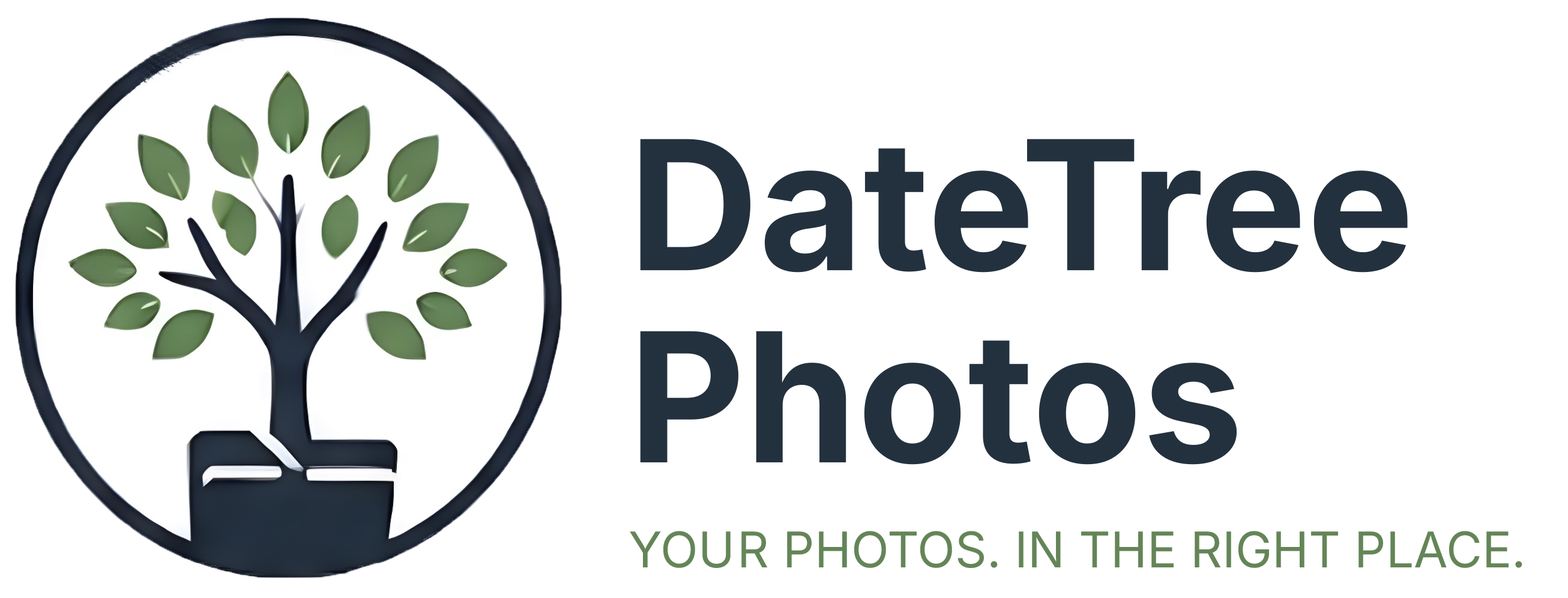
<style>
.page{position:relative;width:1568px;height:598px;background:#ffffff}
.page>*{position:absolute;margin:0}
.t1{font:180.1px/192.1px "Inter-Bold";color:#23313e}
.t2{font:49.2px "Inter-Regular";color:#648558}
</style>
<div class="page">
<p class="t1" style="left:640px;top:139px;width:768px;height:326px">DateTree<br>Photos</p>
<p class="t2" style="left:630px;top:531px;width:892px;height:37px">YOUR PHOTOS. IN THE RIGHT PLACE.</p>
</div>
